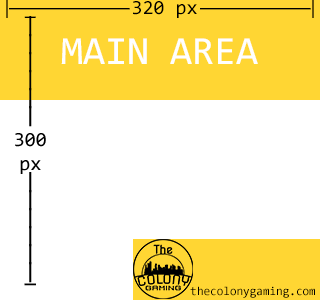
<style>
.page{position:relative;width:320px;height:300px;background:#ffffff}
.page>*{position:absolute;margin:0}
.t1{font:20px "Consolas";letter-spacing:-0.3em;color:#000000}
.t2{font:20px "Consolas";color:#000000}
.t3{font:20px/18px "Consolas";color:#000000;font-weight:bold}
.t4{font:20px/3px "Consolas";color:#000000;font-weight:bold}
.t5{font:40px "Consolas";color:#ffffff}
.t6{font:12px "Consolas";color:#000000}
</style>
<div class="page">
<p class="t1" style="left:6px;top:0px;width:308px;height:18px">|------------------------ <span class="t2">320 px</span>----------------------|</p>
<p class="t3" style="left:15px;top:16px;width:31px;height:270px;text-align:center"><span class="t2">_<br></span>|<br>|<br>|<br>|<br>|<br>|<br><span class="t2">300 px<br></span>|<br>|<br>|<br>|<br>|<br>|<br><span class="t4">_</span></p>
<p class="t5" style="left:61px;top:38px;width:197px;height:26px">MAIN AREA</p>
<p class="t6" style="left:190px;top:286px;width:125px;height:12px">thecolonygaming.com</p>
</div>
